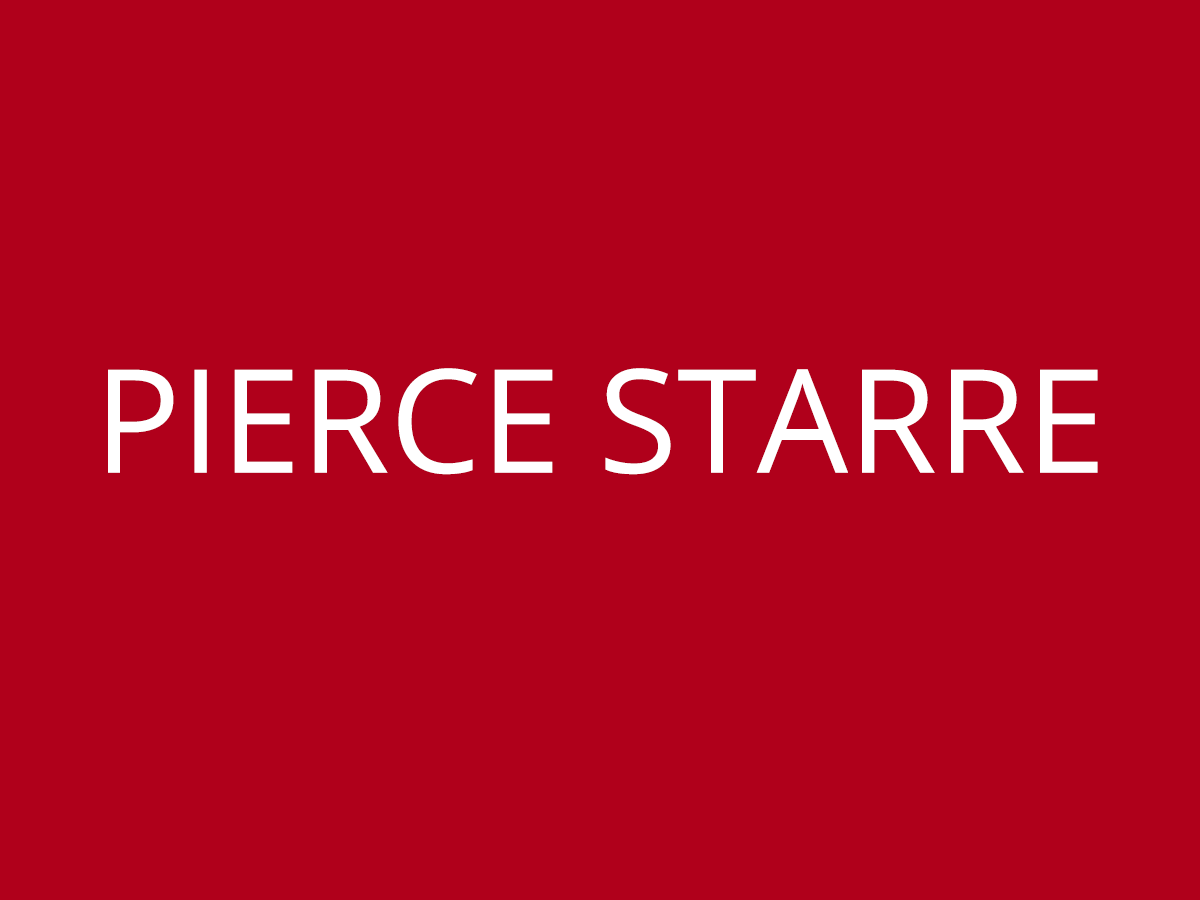
<style>
.page{position:relative;width:1200px;height:900px;background:#b0001b}
.page>*{position:absolute;margin:0}
.t1{font:144px "OpenSans-Regular";color:#ffffff}
</style>
<div class="page">
<p class="t1" style="left:108px;top:368px;width:990px;height:107px">PIERCE STARRE</p>
</div>
